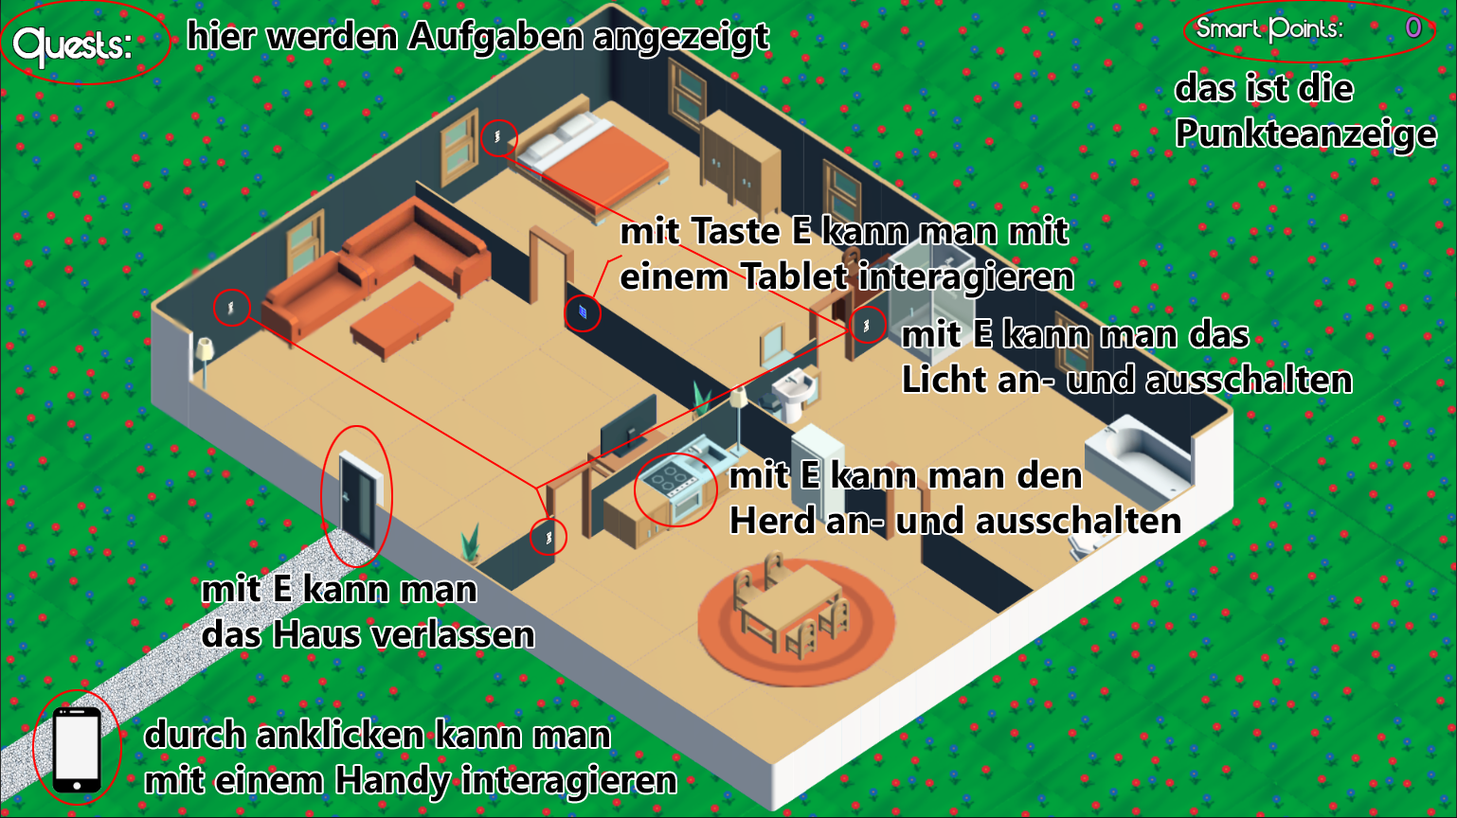
<style>
.page{position:relative;width:1457px;height:818px}
.page>*{position:absolute;margin:0}
.t1{font:37.9px "NirmalaUI-Bold";color:#000000}
</style>
<div class="page">
<p class="t1" style="left:189px;top:20px;width:579px;height:38px">hier werden Aufgaben angezeigt</p>
<p class="t1" style="left:1176px;top:72px;width:260px;height:83px">das ist die <br>Punkteanzeige</p>
<p class="t1" style="left:620px;top:215px;width:452px;height:83px">mit Taste E kann man mit <br>einem Tablet interagieren</p>
<p class="t1" style="left:903px;top:318px;width:448px;height:75px">mit E kann man das <br>Licht an- und ausschalten</p>
<p class="t1" style="left:730px;top:459px;width:450px;height:75px">mit E kann man den <br>Herd an- und ausschalten</p>
<p class="t1" style="left:202px;top:573px;width:331px;height:75px">mit E kann man <br>das Haus verlassen</p>
<p class="t1" style="left:145px;top:719px;width:530px;height:83px">durch anklicken kann man<br>mit einem Handy interagieren</p>
</div>
